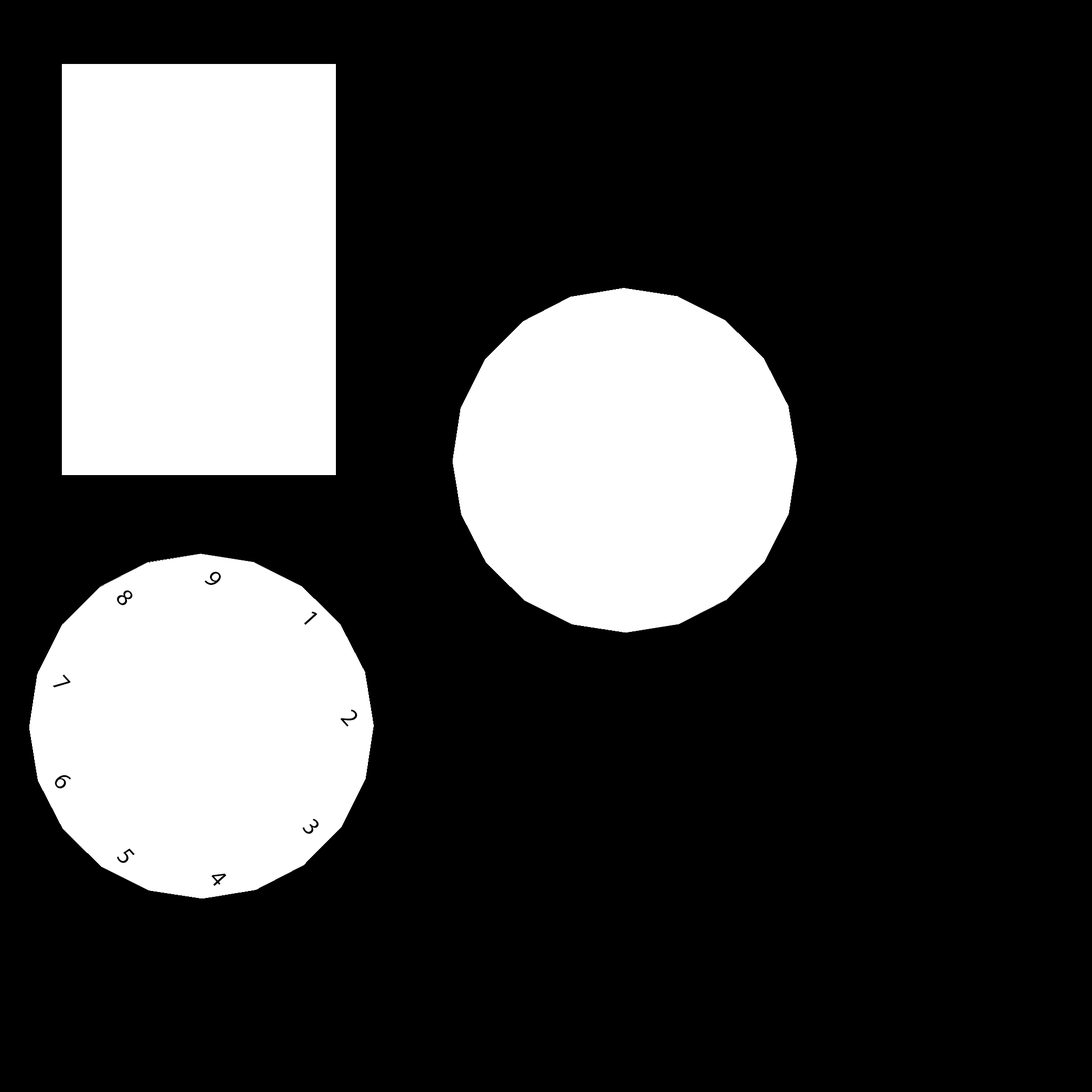
<style>
.page{position:relative;width:1092px;height:1092px;background:#000000}
.page>*{position:absolute;margin:0}
.t1{font:24.5px "MyriadPro-Regular";color:#000000}
</style>
<div class="page">
<p class="t1" style="left:204px;top:572px;width:17px;height:13px;rotate:48deg">9</p>
<p class="t1" style="left:117px;top:590px;width:16px;height:15px;rotate:48deg">8</p>
<p class="t1" style="left:304px;top:612px;width:13px;height:13px;rotate:48deg">1</p>
<p class="t1" style="left:52px;top:674px;width:19px;height:14px;rotate:48deg">7</p>
<p class="t1" style="left:340px;top:709px;width:17px;height:18px;rotate:48deg">2</p>
<p class="t1" style="left:55px;top:775px;width:16px;height:14px;rotate:48deg">6</p>
<p class="t1" style="left:302px;top:818px;width:17px;height:16px;rotate:48deg">3</p>
<p class="t1" style="left:117px;top:848px;width:18px;height:15px;rotate:48deg">5</p>
<p class="t1" style="left:211px;top:873px;width:16px;height:13px;rotate:48deg">4</p>
</div>
